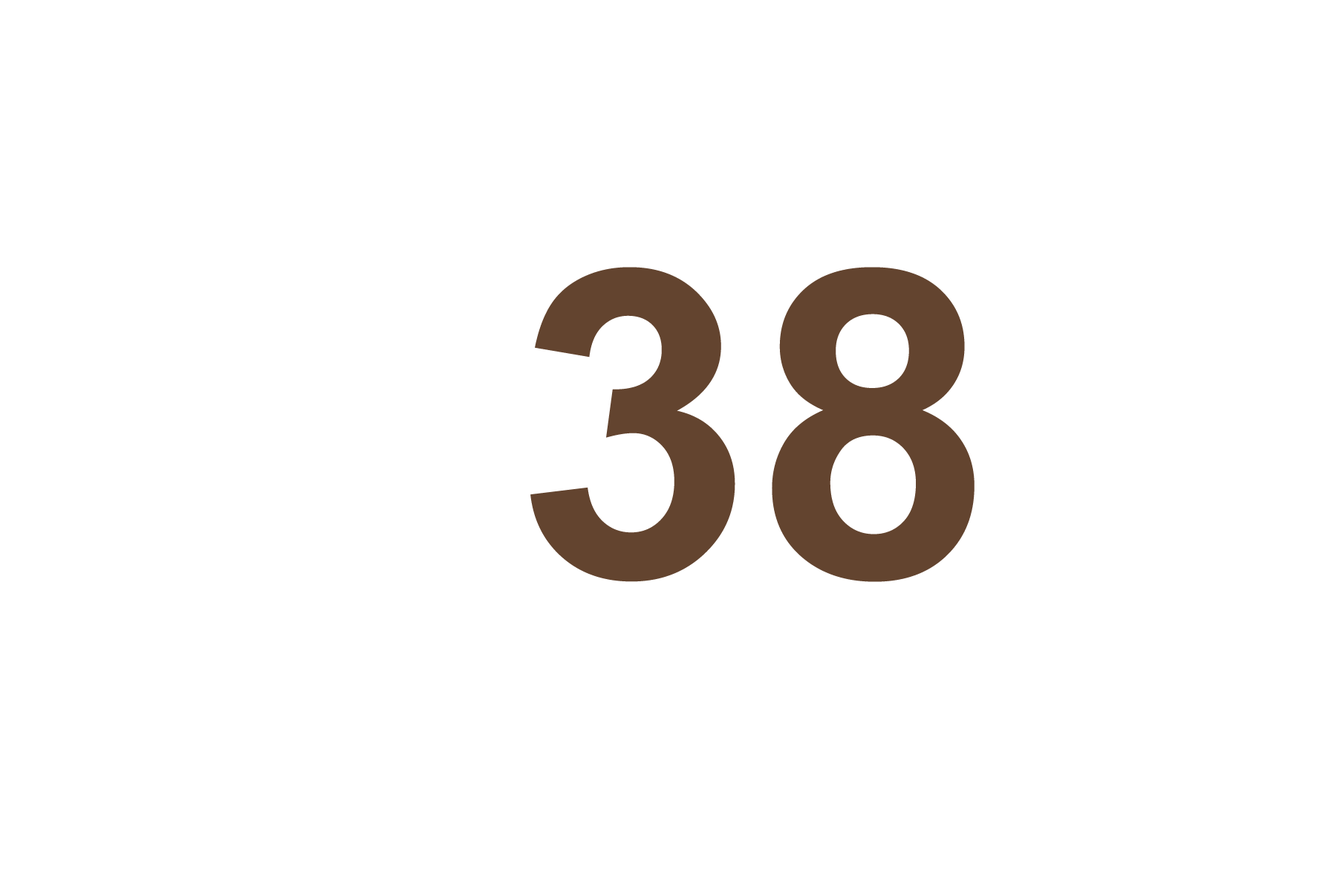
<style>
.page{position:relative;width:1337px;height:892px;background:#ffffff}
.page>*{position:absolute;margin:0}
.t1{font:429.6px "Arial-BoldMT";color:#63442f}
</style>
<div class="page">
<p class="t1" style="left:531px;top:267px;width:444px;height:315px">38</p>
</div>
